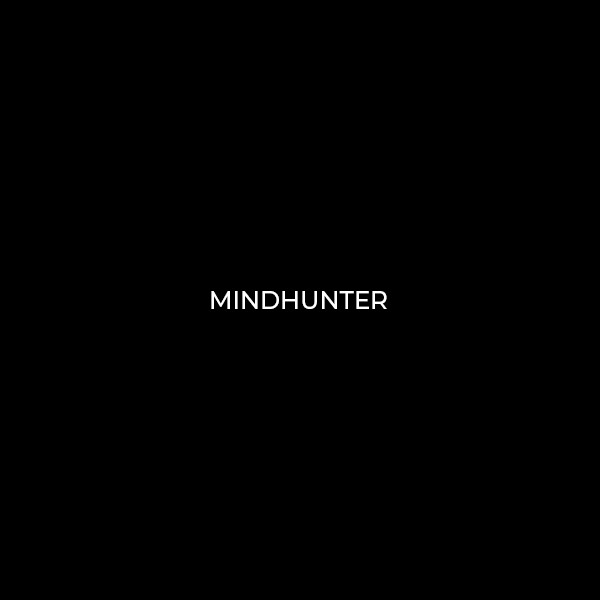
<style>
.page{position:relative;width:600px;height:600px;background:#000000}
.page>*{position:absolute;margin:0}
.t1{font:24.5px "Montserrat-Medium";color:#ffffff;text-transform:uppercase}
</style>
<div class="page">
<p class="t1" style="left:211px;top:291px;width:176px;height:18px">mINDHUNTER</p>
</div>
